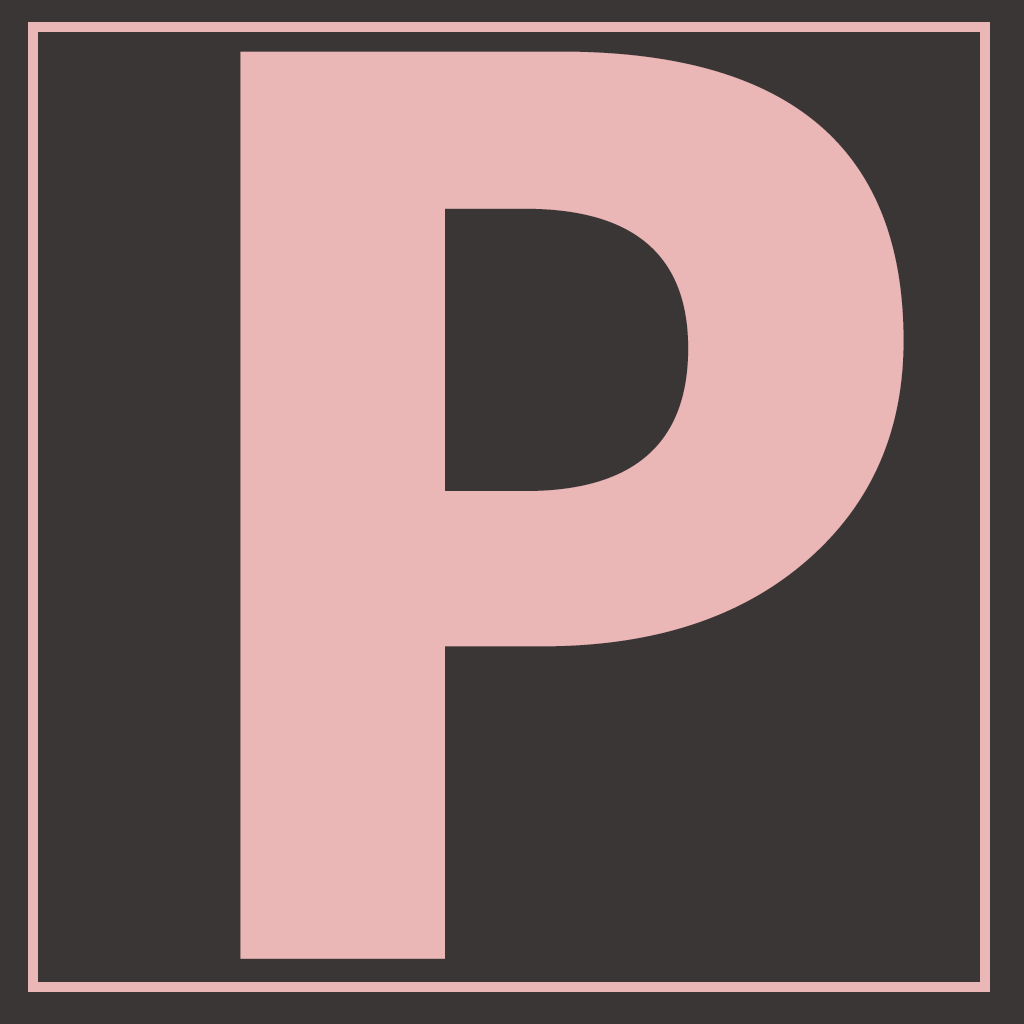
<style>
.page{position:relative;width:1024px;height:1024px;background:#3a3636}
.page>*{position:absolute;margin:0}
.t1{font:1295px "SegoeUI-Bold";color:#eab6b6}
</style>
<div class="page">
<p class="t1" style="left:240px;top:51px;width:664px;height:908px">P</p>
</div>
